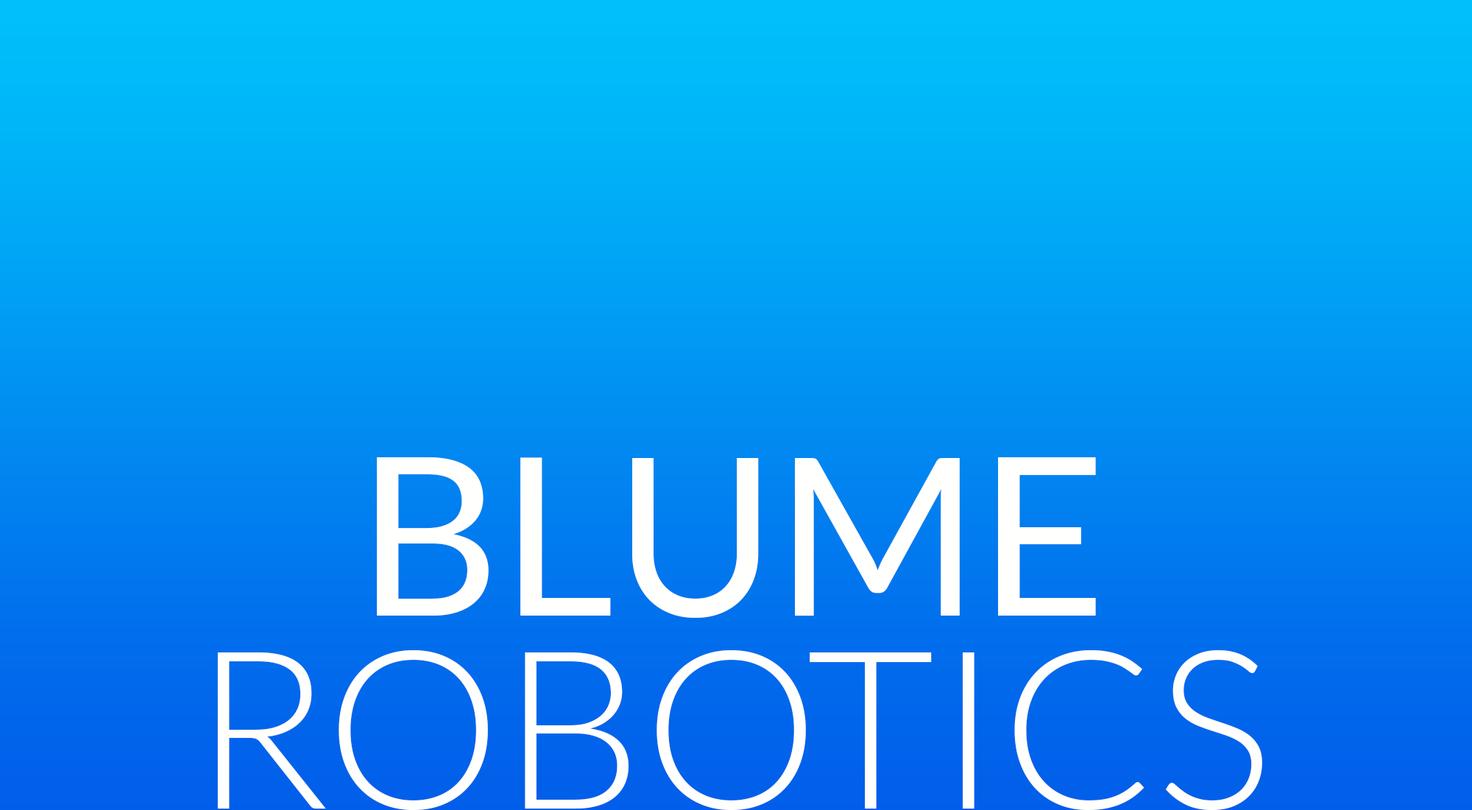
<style>
.page{position:relative;width:1472px;height:810px}
.page>*{position:absolute;margin:0}
.t1{font:220.9px "Lato-Regular";color:#fffffe}
.t2{font:220.9px "Lato-Light";color:#fffffe}
</style>
<div class="page">
<p class="t1" style="left:377px;top:457px;width:719px;height:161px">BLUME</p>
<p class="t2" style="left:217px;top:650px;width:1046px;height:160px">ROBOTICS</p>
</div>
